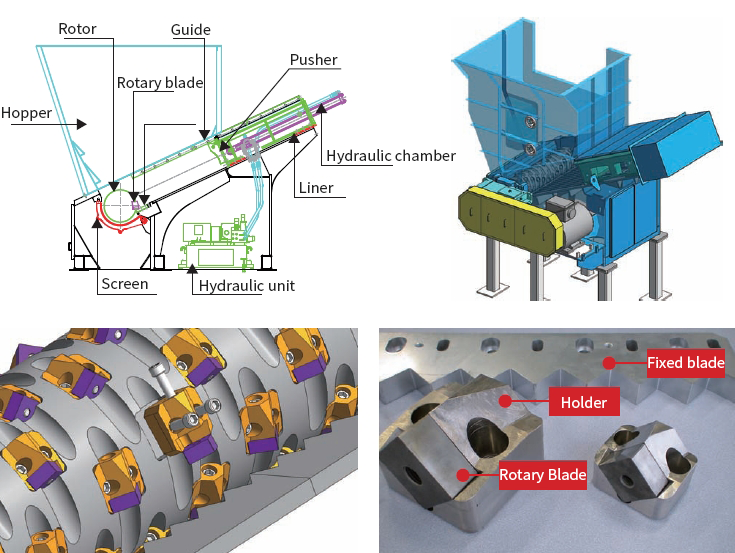
<style>
.page{position:relative;width:735px;height:553px;background:#ffffff}
.page>*{position:absolute;margin:0}
.t1{font:14.6px "NotoSansCJKkr-Regular";color:#212121}
.t2{font:14.6px "NotoSansCJKkr-Regular";color:#ffffff}
</style>
<div class="page">
<p class="t1" style="left:59px;top:23px;width:38px;height:11px">Rotor</p>
<p class="t1" style="left:171px;top:23px;width:40px;height:12px">Guide</p>
<p class="t1" style="left:291px;top:53px;width:47px;height:12px">Pusher</p>
<p class="t1" style="left:118px;top:76px;width:85px;height:15px">Rotary blade</p>
<p class="t1" style="left:2px;top:107px;width:50px;height:14px">Hopper</p>
<p class="t1" style="left:327px;top:149px;width:129px;height:15px">Hydraulic chamber</p>
<p class="t1" style="left:300px;top:182px;width:34px;height:11px">Liner</p>
<p class="t1" style="left:102px;top:278px;width:46px;height:11px">Screen</p>
<p class="t1" style="left:200px;top:279px;width:95px;height:15px">Hydraulic unit</p>
<p class="t2" style="left:648px;top:356px;width:77px;height:12px">Fixed blade</p>
<p class="t2" style="left:562px;top:396px;width:45px;height:12px">Holder</p>
<p class="t2" style="left:500px;top:468px;width:86px;height:15px">Rotary Blade</p>
</div>
